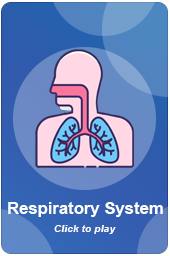
<style>
.page{position:relative;width:170px;height:256px}
.page>*{position:absolute;margin:0}
.t1{font:16.7px "Arial-BoldMT";color:#ffffff}
.t2{font:10.4px "Arial-BoldItalicMT";color:#ffffff}
</style>
<div class="page">
<p class="t1" style="left:8px;top:202px;width:155px;height:15px">Respiratory System</p>
<p class="t2" style="left:54px;top:225px;width:62px;height:9px">Click to play</p>
</div>
